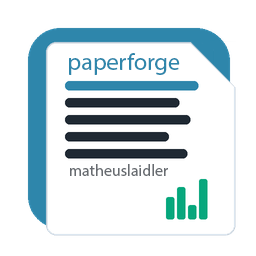
<style>
.page{position:relative;width:256px;height:256px;background:#ffffff}
.page>*{position:absolute;margin:0}
.t1{font:24px "MyriadPro-Regular";color:#2e86ab}
.t2{font:16px "MyriadPro-Regular";color:#676b70}
</style>
<div class="page">
<p class="t1" style="left:69px;top:53px;width:111px;height:22px">paperforge</p>
<p class="t2" style="left:70px;top:164px;width:98px;height:12px">matheuslaidler</p>
</div>
